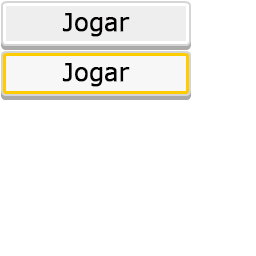
<style>
.page{position:relative;width:256px;height:256px;background:#ffffff}
.page>*{position:absolute;margin:0}
.t1{font:24px "Meiryo";color:#020000;font-weight:bold}
</style>
<div class="page">
<p class="t1" style="left:62px;top:13px;width:68px;height:24px">Jogar</p>
<p class="t1" style="left:62px;top:63px;width:68px;height:24px">Jogar</p>
</div>
